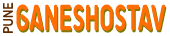
<style>
.page{position:relative;width:170px;height:36px;background:#ffffff}
.page>*{position:absolute;margin:0}
.t1{font:14px "SciFly-Sans";color:#612b00;text-transform:uppercase}
.t2{font:36px "SciFly-Sans";color:#ff6e04;text-transform:uppercase;font-weight:bold;scale:0.67 1}
</style>
<div class="page">
<p class="t1" style="left:3px;top:2px;width:10px;height:31px;rotate:-90deg">Pune</p>
<p class="t2" style="left:16px;top:4px;width:150px;height:27px">Ganeshostav</p>
</div>
